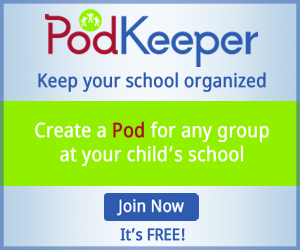
<style>
.page{position:relative;width:300px;height:250px;background:#92ef00}
.page>*{position:absolute;margin:0}
.t1{font:19px "NotoSans";color:#2e5baf;font-weight:bold;scale:0.88 1}
.t2{font:20px "NotoSans";color:#ffffff;font-weight:bold;scale:0.88 1}
.t3{font:20px "NotoSans";color:#a81124;font-weight:bold;scale:0.88 1}
.t4{font:16px "NotoSans";color:#2e5baf;font-weight:bold;scale:0.88 1}
</style>
<div class="page">
<p class="t1" style="left:38px;top:72px;width:228px;height:20px">Keep your school organized</p>
<p class="t2" style="left:35px;top:121px;width:234px;height:46px;text-align:center">Create a <span class="t3">Pod </span>for any group<br>at your child’s school</p>
<p class="t4" style="left:120px;top:228px;width:65px;height:13px">It’s FREE!</p>
</div>
